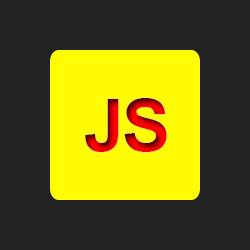
<style>
.page{position:relative;width:250px;height:250px;background:#222222}
.page>*{position:absolute;margin:0}
.t1{font:72px "Arial-BoldMT";text-transform:uppercase}
</style>
<div class="page">
<p class="t1" style="left:85px;top:98px;width:82px;height:54px">JS</p>
</div>
